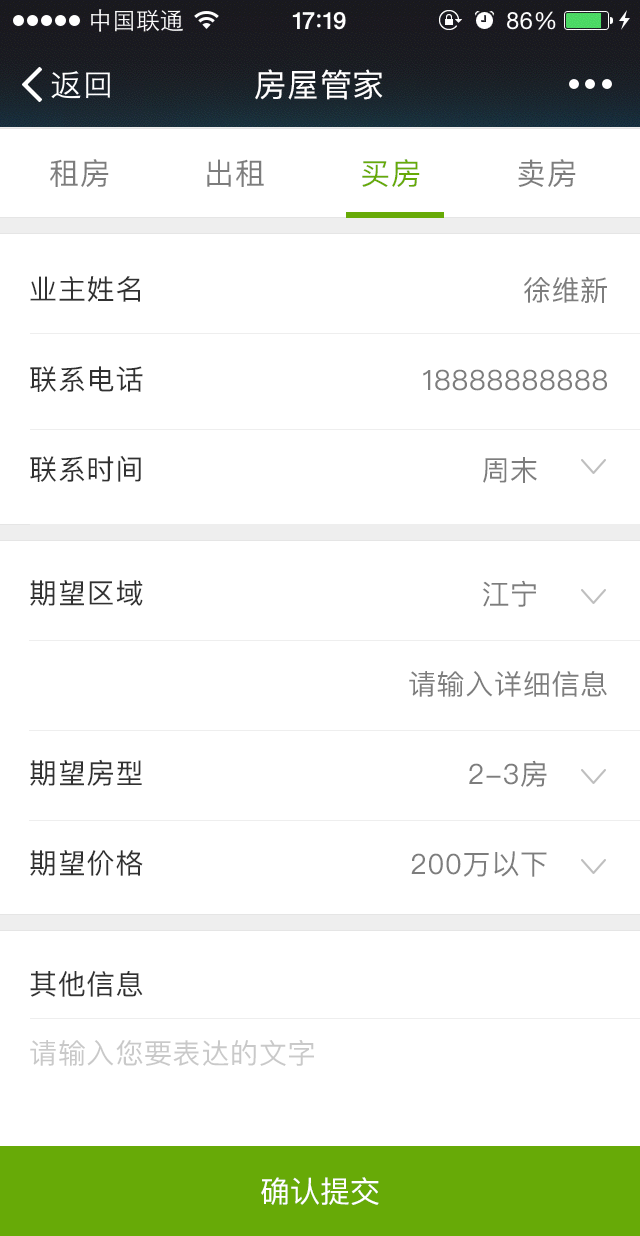
<style>
.page{position:relative;width:640px;height:1236px;background:#ffffff}
.page>*{position:absolute;margin:0}
.t1{font:32px "PingFangSC-Regular";letter-spacing:0.025em;color:#ffffff}
.t2{font:30px "PingFangSC-Regular";letter-spacing:0.025em;color:#7d7d7d}
.t3{font:30px "PingFangSC-Regular";letter-spacing:0.025em;color:#67aa07}
.t4{font:28px/90px "PingFangSC-Regular";letter-spacing:0.025em;color:#313131}
.t5{font:28px/90px "PingFangSC-Regular";letter-spacing:0.025em;color:#7d7d7d}
.t6{font:28px "PingFangSC-Regular";letter-spacing:0.025em;color:#313131}
.t7{font:28px "PingFangSC-Regular";letter-spacing:0.025em;color:#c9c9c9}
.t8{font:30px "PingFangSC-Regular";color:#ffffff}
</style>
<div class="page">
<p class="t1" style="left:255px;top:69px;width:128px;height:31px">房屋管家</p>
<p class="t2" style="left:50px;top:159px;width:59px;height:28px">租房</p>
<p class="t2" style="left:207px;top:159px;width:57px;height:28px">出租</p>
<p class="t3" style="left:362px;top:159px;width:58px;height:28px">买房</p>
<p class="t2" style="left:518px;top:159px;width:58px;height:28px">卖房</p>
<p class="t4" style="left:30px;top:276px;width:113px;height:206px">业主姓名<br>联系电话<br>联系时间</p>
<p class="t5" style="left:423px;top:276px;width:184px;height:207px;text-align:right">徐维新<br>18888888888<br>周末</p>
<p class="t4" style="left:30px;top:580px;width:113px;height:296px">期望区域<br><br>期望房型<br>期望价格</p>
<p class="t5" style="left:409px;top:580px;width:198px;height:297px;text-align:right">江宁       <br>请输入详细信息<br>2-3房      <br>200万以下</p>
<p class="t6" style="left:30px;top:970px;width:113px;height:27px">其他信息</p>
<p class="t7" style="left:30px;top:1040px;width:284px;height:26px">请输入您要表达的文字</p>
<p class="t8" style="left:261px;top:1177px;width:118px;height:28px">确认提交</p>
</div>
